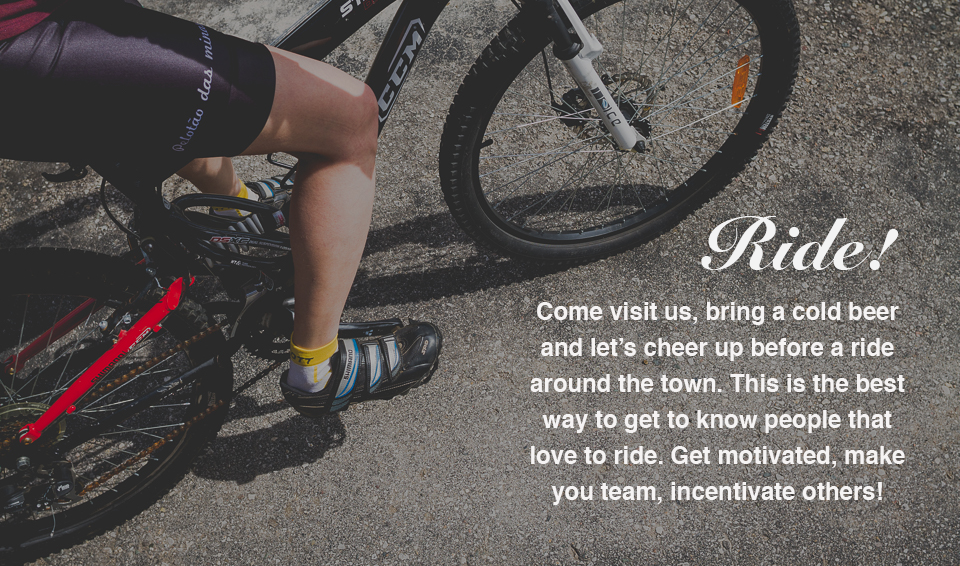
<style>
.page{position:relative;width:960px;height:566px}
.page>*{position:absolute;margin:0}
.t1{font:72px "SnellRoundhand-Black";color:#f3f3f3}
.t2{font:24px/36px "Helvetica-Bold";color:#f5f3f3}
</style>
<div class="page">
<p class="t1" style="left:701px;top:216px;width:198px;height:54px">Ride!</p>
<p class="t2" style="left:530px;top:302px;width:375px;height:203px;text-align:center">Come visit us, bring a cold beer and let’s cheer up before a ride around the town. This is the best way to get to know people that love to ride. Get motivated, make you team, incentivate others!</p>
</div>
